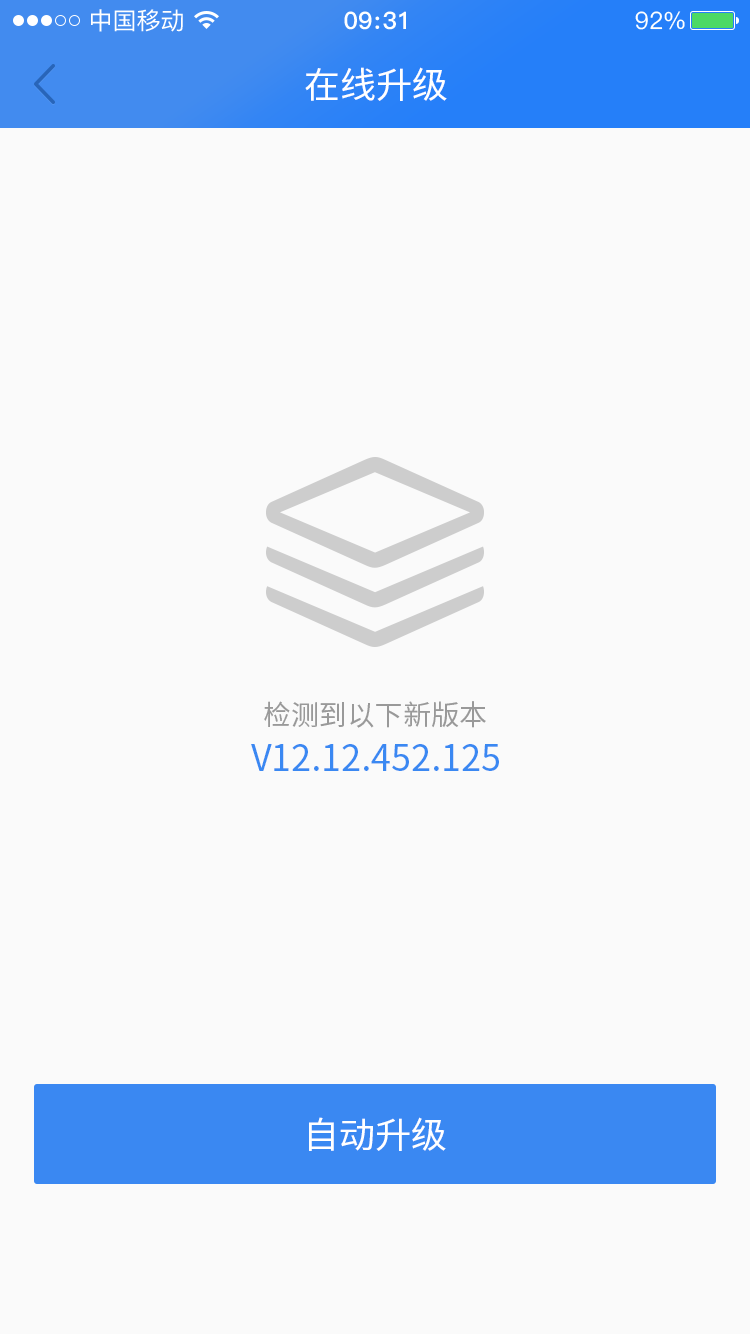
<style>
.page{position:relative;width:750px;height:1334px;background:#fafafa}
.page>*{position:absolute;margin:0}
.t1{font:36px "SourceHanSansCN-Regular";color:#ffffff}
.t2{font:28px "SourceHanSansCN-Regular";color:#999999}
.t3{font:36px "SourceHanSansCN-Regular";color:#3a88f2}
</style>
<div class="page">
<p class="t1" style="left:305px;top:67px;width:142px;height:34px">在线升级</p>
<p class="t2" style="left:264px;top:701px;width:222px;height:27px">检测到以下新版本</p>
<p class="t3" style="left:251px;top:744px;width:248px;height:27px">V12.12.452.125</p>
<p class="t1" style="left:309px;top:1117px;width:137px;height:34px">自动升级</p>
</div>
